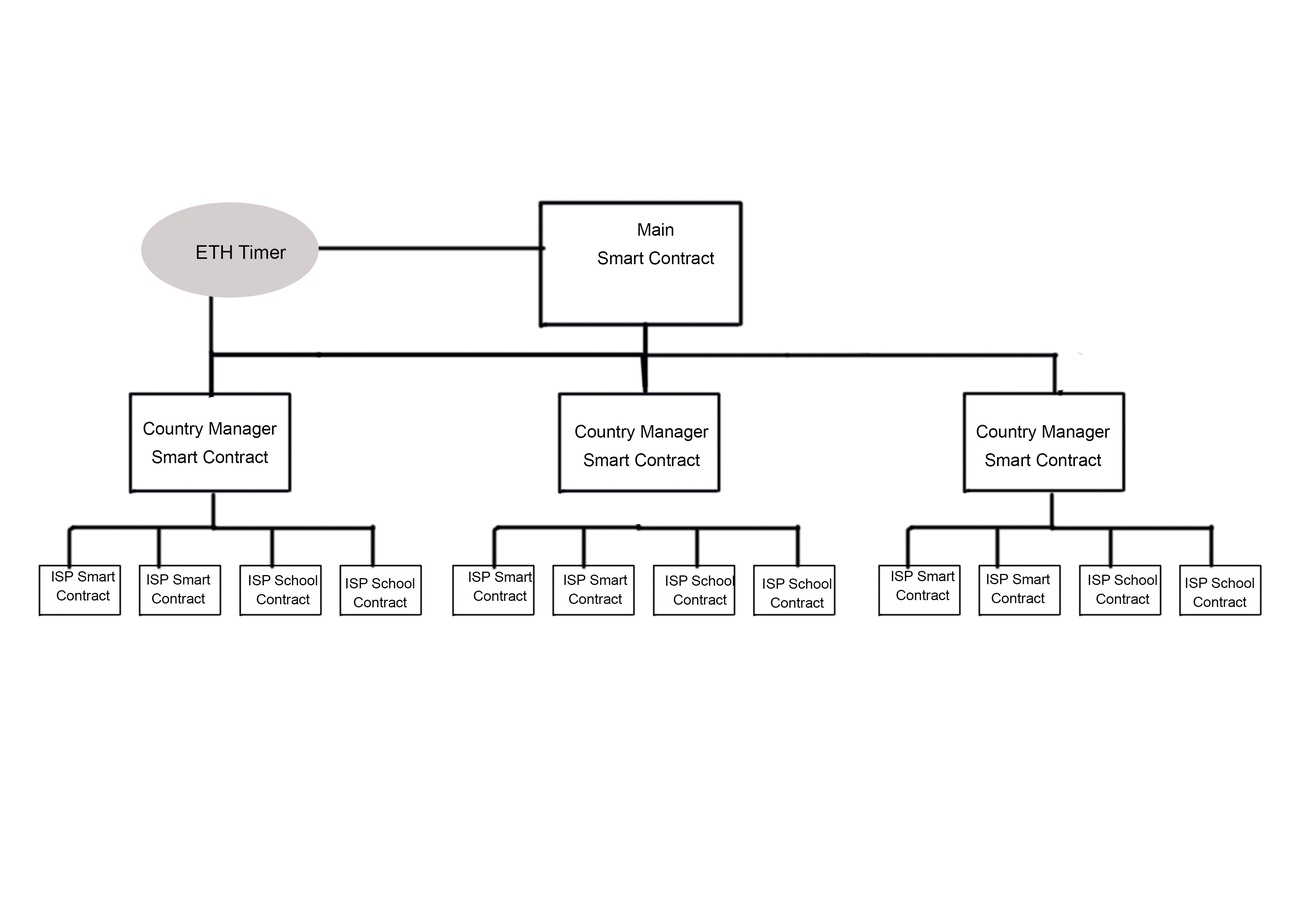
<style>
.page{position:relative;width:1309px;height:911px;background:#ffffff}
.page>*{position:absolute;margin:0}
.t1{font:17.4px/28.5px "ArialMT";color:#000005}
.t2{font:19px "ArialMT";color:#050505}
.t3{font:14.2px/19px "ArialMT";color:#000005}
</style>
<div class="page">
<p class="t1" style="left:598px;top:223px;width:117px;height:42px;text-align:center">Main <br>Smart Contract</p>
<p class="t2" style="left:197px;top:245px;width:90px;height:14px">ETH Timer</p>
<p class="t1" style="left:143px;top:422px;width:134px;height:41px;text-align:center">Country Manager<br>Smart Contract</p>
<p class="t1" style="left:575px;top:425px;width:134px;height:41px;text-align:center">Country Manager<br>Smart Contract</p>
<p class="t1" style="left:977px;top:425px;width:133px;height:41px;text-align:center">Country Manager<br>Smart Contract</p>
<p class="t3" style="left:52px;top:571px;width:63px;height:29px;text-align:center">ISP Smart Contract</p>
<p class="t3" style="left:147px;top:574px;width:64px;height:29px;text-align:center">ISP Smart Contract</p>
<p class="t3" style="left:249px;top:575px;width:68px;height:29px;text-align:center">ISP School Contract</p>
<p class="t3" style="left:346px;top:578px;width:68px;height:29px;text-align:center">ISP School Contract</p>
<p class="t3" style="left:469px;top:572px;width:63px;height:29px;text-align:center">ISP Smart Contract</p>
<p class="t3" style="left:564px;top:575px;width:64px;height:29px;text-align:center">ISP Smart Contract</p>
<p class="t3" style="left:666px;top:575px;width:68px;height:30px;text-align:center">ISP School Contract</p>
<p class="t3" style="left:763px;top:578px;width:68px;height:30px;text-align:center">ISP School Contract</p>
<p class="t3" style="left:892px;top:571px;width:63px;height:29px;text-align:center">ISP Smart Contract</p>
<p class="t3" style="left:987px;top:574px;width:63px;height:29px;text-align:center">ISP Smart Contract</p>
<p class="t3" style="left:1089px;top:575px;width:68px;height:29px;text-align:center">ISP School Contract</p>
<p class="t3" style="left:1186px;top:578px;width:68px;height:29px;text-align:center">ISP School Contract</p>
</div>
